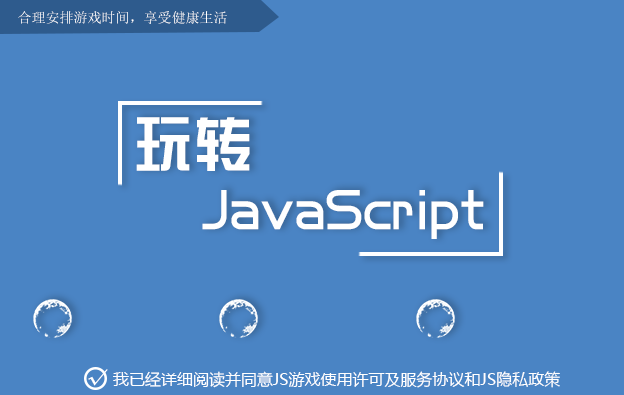
<style>
.page{position:relative;width:624px;height:395px;background:#4a84c4}
.page>*{position:absolute;margin:0}
.t1{font:14px "SimSun";color:#ffffff}
.t2{font:60px "BDZYJT--GB1-0";color:#ffffff}
.t3{font:24px "HYk2gj";color:#ffffff}
.t4{font:16px "MicrosoftYaHei";color:#ffffff}
</style>
<div class="page">
<p class="t1" style="left:18px;top:11px;width:209px;height:13px">合理安排游戏时间，享受健康生活</p>
<p class="t2" style="left:136px;top:117px;width:114px;height:54px">玩转</p>
<p class="t2" style="left:202px;top:190px;width:282px;height:49px">JavaScript</p>
<p class="t3" style="left:88px;top:369px;width:20px;height:17px">√</p>
<p class="t4" style="left:113px;top:371px;width:447px;height:17px">我已经详细阅读并同意JS游戏使用许可及服务协议和JS隐私政策</p>
</div>
